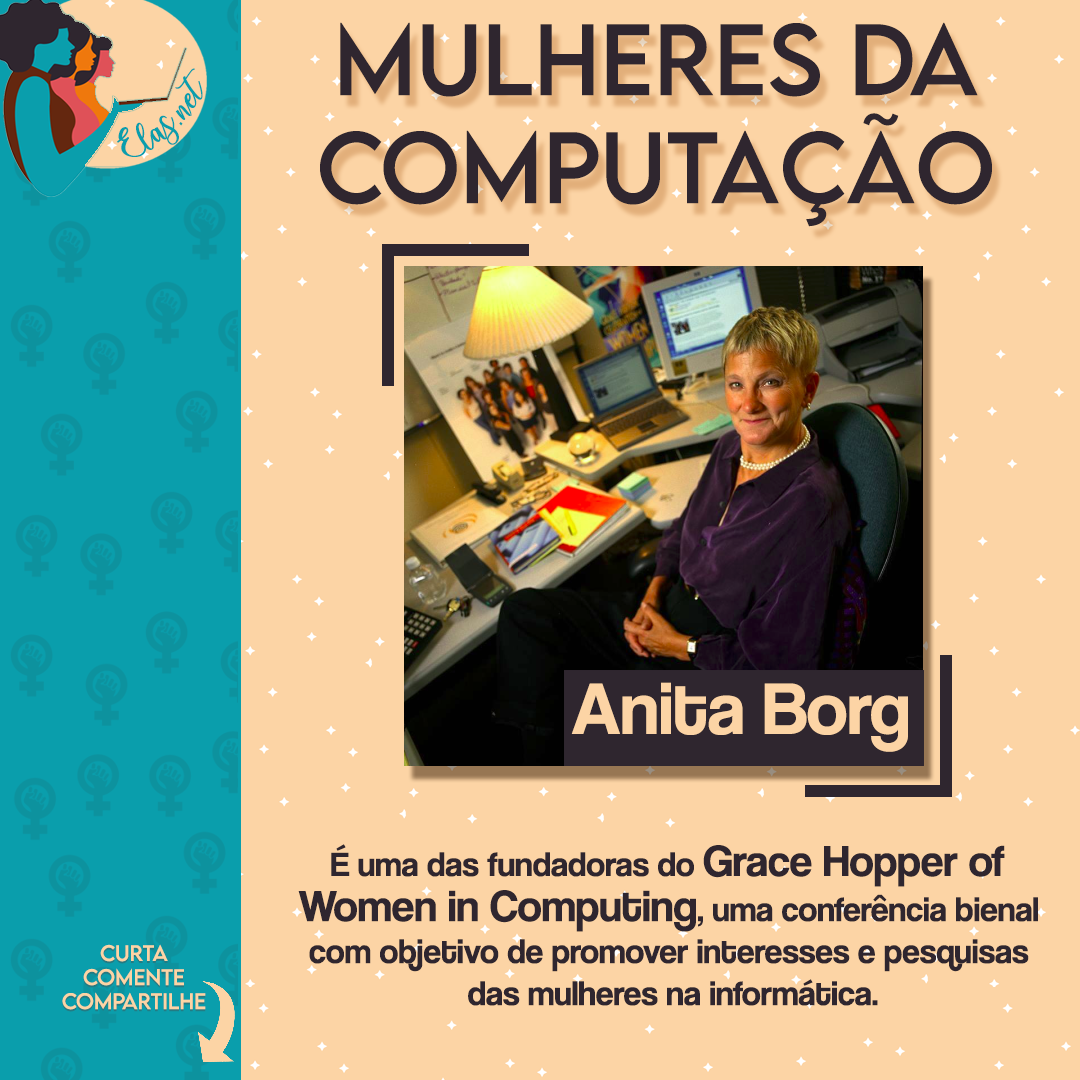
<style>
.page{position:relative;width:1080px;height:1080px;background:#fcd4a5}
.page>*{position:absolute;margin:0}
.t1{font:90px "LEMONMILK-Regular";color:#2f262f}
.t2{font:25px "charlinda-Regular";color:#0a9eac;scale:1.18 1}
.t3{font:76px "CoolveticaRg-Regular";color:#fcd4a5}
.t4{font:35px "CoolveticaRg-Regular";color:#2f262f}
.t5{font:35px/45px "CoolveticaRg-Regular";color:#2f262f}
.t6{font:45px/45px "CoolveticaRg-Regular";color:#2f262f}
.t7{font:20px "LEMONMILK-Regular"}
.t8{font:20px "LEMONMILK-Regular";color:#fcd4a5}
</style>
<div class="page">
<p class="t1" style="left:320px;top:22px;width:672px;height:205px;text-align:center">Mulheres da<br>Computação</p>
<p class="t2" style="left:117px;top:68px;width:86px;height:89px;rotate:-43deg">Elas.net</p>
<p class="t3" style="left:571px;top:682px;width:337px;height:70px">Anita Borg</p>
<p class="t4" style="left:298px;top:844px;width:740px;height:162px;text-align:center"><span class="t5">É uma das fundadoras do </span><span class="t6">Grace Hopper of <br>Women in Computing</span><span class="t5">, uma conferência bienal</span> <br>com objetivo de promover interesses e pesquisas <br>das mulheres na informática.</p>
<p class="t7" style="left:62px;top:946px;width:144px;height:66px;text-align:center">Curta<br>Comente<br>Compartilhe</p>
<p class="t8" style="left:62px;top:944px;width:144px;height:66px;text-align:center">Curta<br>Comente<br>Compartilhe</p>
</div>
